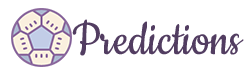
<style>
.page{position:relative;width:250px;height:75px;background:#ffffff}
.page>*{position:absolute;margin:0}
.t1{font:54.3px "Cookie-Regular";color:#523d61;scale:0.95 1}
</style>
<div class="page">
<p class="t1" style="left:72px;top:19px;width:172px;height:37px">Predictions</p>
</div>
